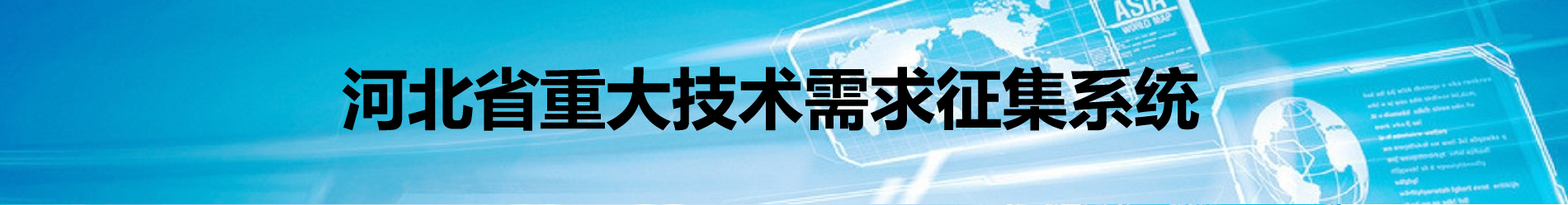
<style>
.page{position:relative;width:1568px;height:205px}
.page>*{position:absolute;margin:0}
.t1{font:66px "MicrosoftYaHei-Bold";color:#000000}
</style>
<div class="page">
<p class="t1" style="left:342px;top:67px;width:857px;height:64px">河北省重大技术需求征集系统</p>
</div>
